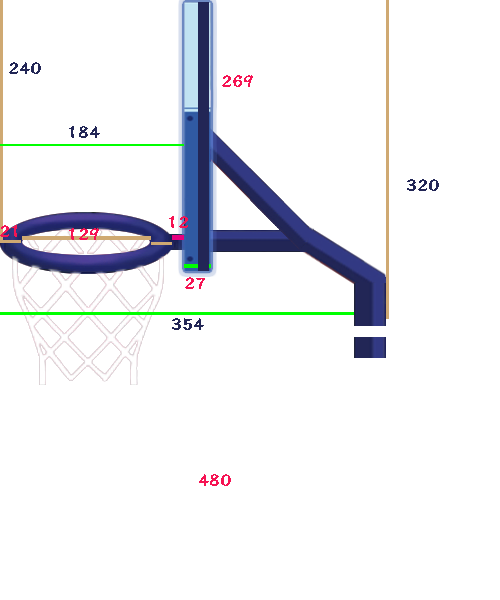
<style>
.page{position:relative;width:500px;height:600px;background:#ffffff}
.page>*{position:absolute;margin:0}
.t1{font:20px "FZCKJW--GB1-0";color:#222656}
.t2{font:20px "FZCKJW--GB1-0";color:#f61353}
</style>
<div class="page">
<p class="t1" style="left:9px;top:62px;width:32px;height:12px">240</p>
<p class="t2" style="left:222px;top:75px;width:31px;height:12px">269</p>
<p class="t1" style="left:69px;top:126px;width:31px;height:12px">184</p>
<p class="t1" style="left:407px;top:179px;width:32px;height:12px">320</p>
<p class="t2" style="left:169px;top:216px;width:19px;height:12px">12</p>
<p class="t2" style="left:0px;top:225px;width:17px;height:12px">21</p>
<p class="t2" style="left:69px;top:228px;width:30px;height:12px">129</p>
<p class="t2" style="left:185px;top:277px;width:20px;height:12px">27</p>
<p class="t1" style="left:172px;top:318px;width:32px;height:12px">354</p>
<p class="t2" style="left:199px;top:474px;width:32px;height:12px">480</p>
</div>
